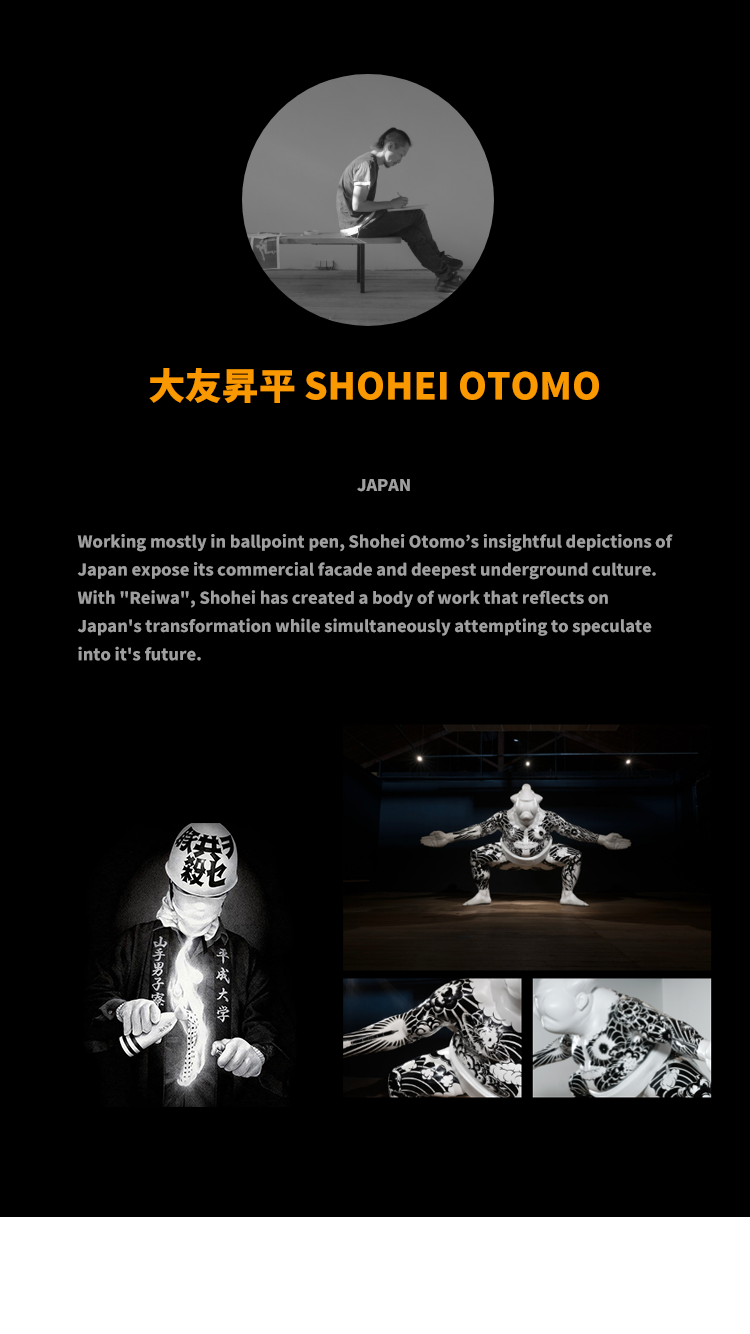
<style>
.page{position:relative;width:750px;height:1334px;background:#000000}
.page>*{position:absolute;margin:0}
.t1{font:36.8px "NotoSansJP-Black";color:#fa9800}
.t2{font:16.1px "NotoSansJP-Black";color:#9f9f9f}
</style>
<div class="page">
<p class="t1" style="left:149px;top:368px;width:450px;height:35px">大友昇平 SHOHEI OTOMO</p>
<p class="t2" style="left:77px;top:479px;width:596px;height:182px;text-align:center">JAPAN<br><br>Working mostly in ballpoint pen, Shohei Otomo’s insightful depictions of Japan expose its commercial facade and deepest underground culture. With "Reiwa", Shohei has created a body of work that reflects on Japan's transformation while simultaneously attempting to speculate into it's future.</p>
</div>
